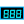
<style>
.page{position:relative;width:24px;height:24px;background:#ffffff}
.page>*{position:absolute;margin:0}
.t1{font:10.7px "Segment7Standard";letter-spacing:-0.025em;color:#07e0ee;font-weight:bold}
</style>
<div class="page">
<p class="t1" style="left:3px;top:9px;width:19px;height:9px">888</p>
</div>
